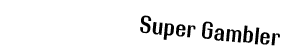
<style>
.page{position:relative;width:283px;height:56px;background:#ffffff}
.page>*{position:absolute;margin:0}
.t1{font:24px "RolloutPlain";color:#000000}
</style>
<div class="page">
<p class="t1" style="left:140px;top:15px;width:140px;height:31px;rotate:6deg">Super Gambler</p>
</div>
